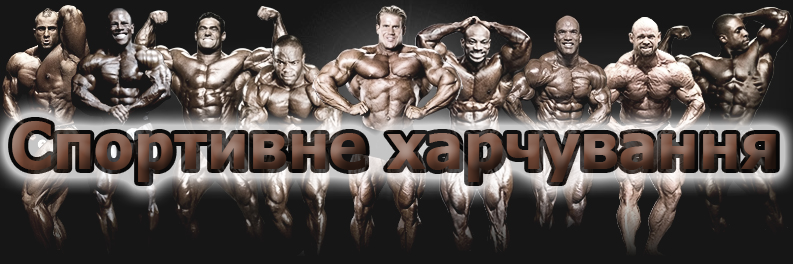
<style>
.page{position:relative;width:793px;height:264px;background:#161616}
.page>*{position:absolute;margin:0}
.t1{font:64px "Tahoma-Bold"}
</style>
<div class="page">
<p class="t1" style="left:12px;top:121px;width:764px;height:61px">Спортивне харчування</p>
</div>
